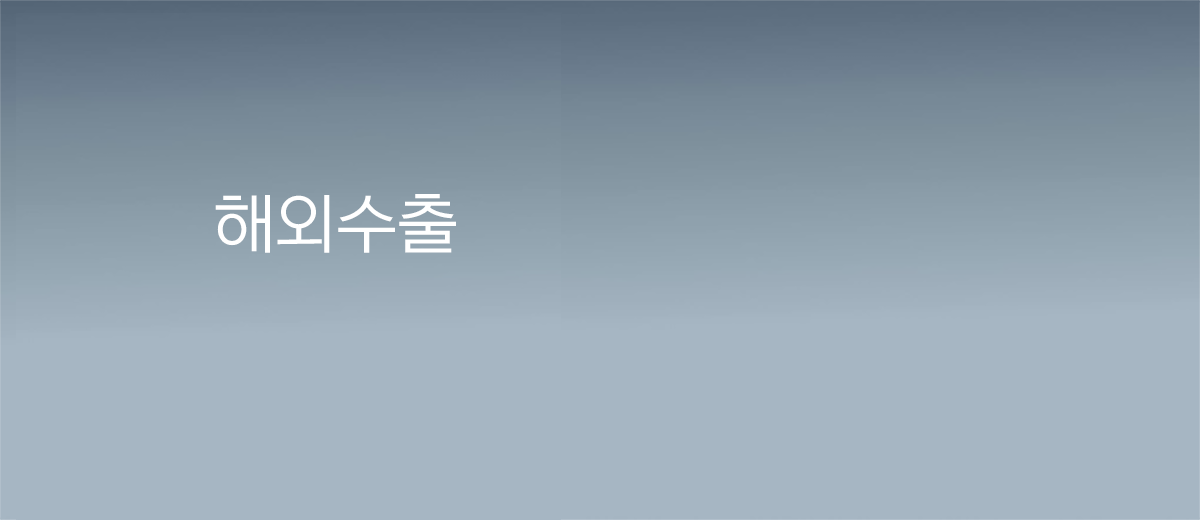
<style>
.page{position:relative;width:1200px;height:520px;background:#a6b6c3}
.page>*{position:absolute;margin:0}
.t1{font:65px "NEXONLv1GothicLowOTFRegular";color:#ffffff}
</style>
<div class="page">
<p class="t1" style="left:215px;top:194px;width:241px;height:59px">해외수출</p>
</div>
